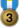
<style>
.page{position:relative;width:19px;height:28px}
.page>*{position:absolute;margin:0}
.t1{font:12.7px "Helvetica-Bold";color:#000000}
</style>
<div class="page">
<p class="t1" style="left:6px;top:13px;width:7px;height:10px">3</p>
</div>
